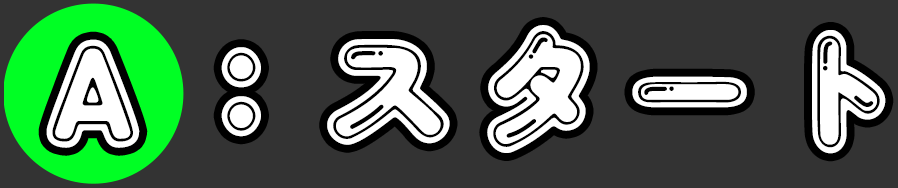
<style>
.page{position:relative;width:898px;height:188px;background:#333333}
.page>*{position:absolute;margin:0}
.t1{font:150px "DokiDokiFantasia";color:#ffffff}
</style>
<div class="page">
<p class="t1" style="left:221px;top:25px;width:665px;height:129px">：スタート</p>
</div>
